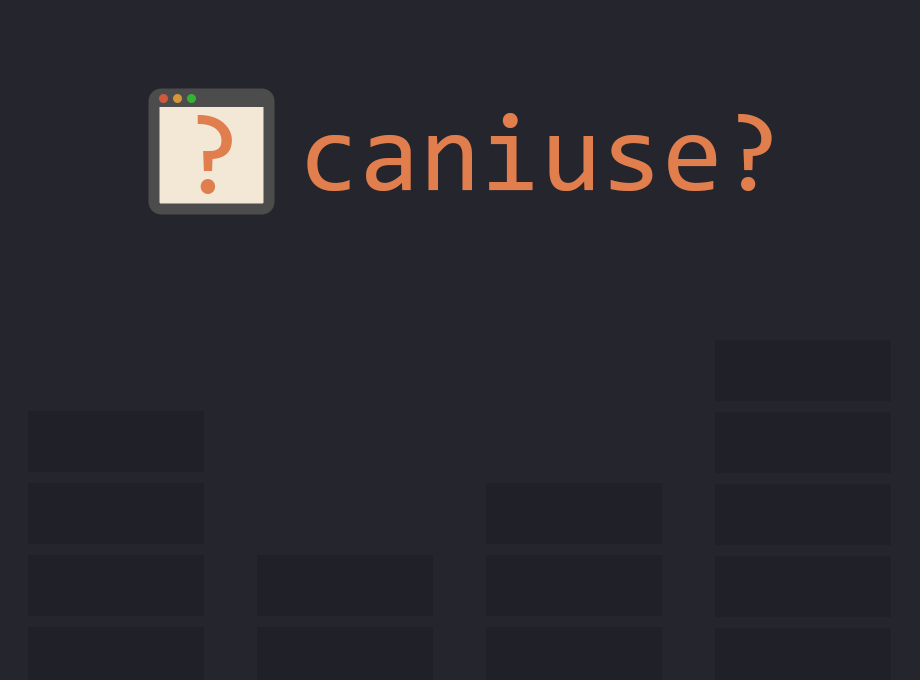
<style>
.page{position:relative;width:920px;height:680px;background:#25252e}
.page>*{position:absolute;margin:0}
.t1{font:110px "Consolas";color:#e07e4d}
</style>
<div class="page">
<p class="t1" style="left:307px;top:113px;width:465px;height:78px">caniuse?</p>
</div>
